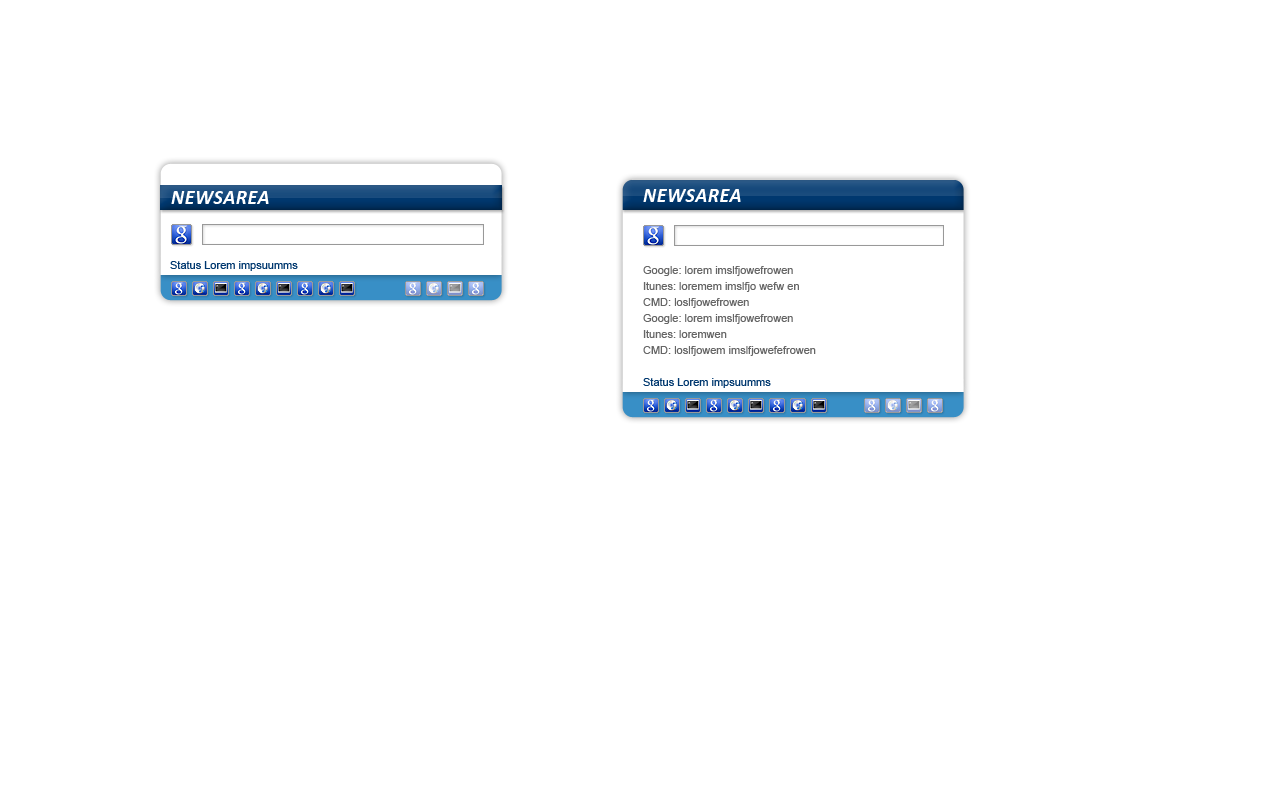
<style>
.page{position:relative;width:1280px;height:800px;background:#ffffff}
.page>*{position:absolute;margin:0}
.t1{font:20px "Calibri-BoldItalic";letter-spacing:0.025em;color:#ffffff;text-transform:uppercase}
.t2{font:11px "ArialMT";color:#00386f}
.t3{font:11px/16px "ArialMT";color:#666666}
.t4{font:11px/16px "ArialMT";color:#00386f}
</style>
<div class="page">
<p class="t1" style="left:171px;top:191px;width:98px;height:13px">Newsarea</p>
<p class="t1" style="left:643px;top:189px;width:98px;height:13px">Newsarea</p>
<p class="t2" style="left:170px;top:261px;width:128px;height:10px">Status Lorem impsuumms</p>
<p class="t3" style="left:643px;top:266px;width:173px;height:122px">Google: lorem imslfjowefrowen<br>Itunes: loremem imslfjo wefw en<br>CMD: loslfjowefrowen<br>Google: lorem imslfjowefrowen<br>Itunes: loremwen<br>CMD: loslfjowem imslfjowefefrowen<br><br><span class="t4">Status Lorem impsuumms</span></p>
</div>
